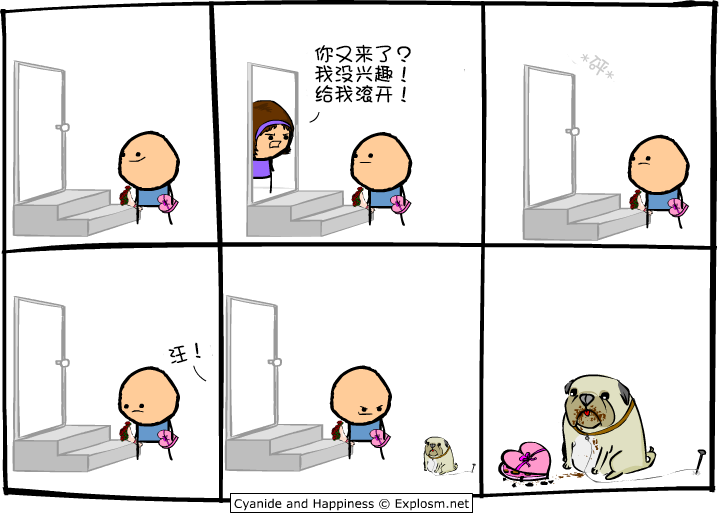
<style>
.page{position:relative;width:720px;height:515px;background:#ffffff}
.page>*{position:absolute;margin:0}
.t1{font:20px/20px "DFGirl";color:#000000}
.t2{font:20px "DFGirl";color:#cccccc}
.t3{font:20px "DFGirl";color:#000000}
</style>
<div class="page">
<p class="t1" style="left:314px;top:44px;width:97px;height:59px">你又来了？<br>我没兴趣！<br>给我滚开！</p>
<p class="t2" style="left:580px;top:54px;width:34px;height:25px;rotate:34deg">*砰*</p>
<p class="t3" style="left:168px;top:342px;width:33px;height:22px;rotate:-14deg">汪！</p>
</div>
